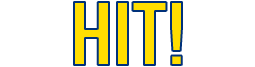
<style>
.page{position:relative;width:255px;height:67px;background:#ffffff}
.page>*{position:absolute;margin:0}
.t1{font:90px "BebasNeue";color:#ffde00;scale:1.11 1}
</style>
<div class="page">
<p class="t1" style="left:74px;top:2px;width:108px;height:63px">HIT!</p>
</div>
